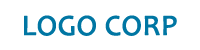
<style>
.page{position:relative;width:200px;height:50px;background:#ffffff}
.page>*{position:absolute;margin:0}
.t1{font:50px "Candara";color:#0076a3;font-weight:bold}
</style>
<div class="page">
<p class="t1" style="left:24px;top:15px;width:153px;height:21px">LOGO CORP</p>
</div>
